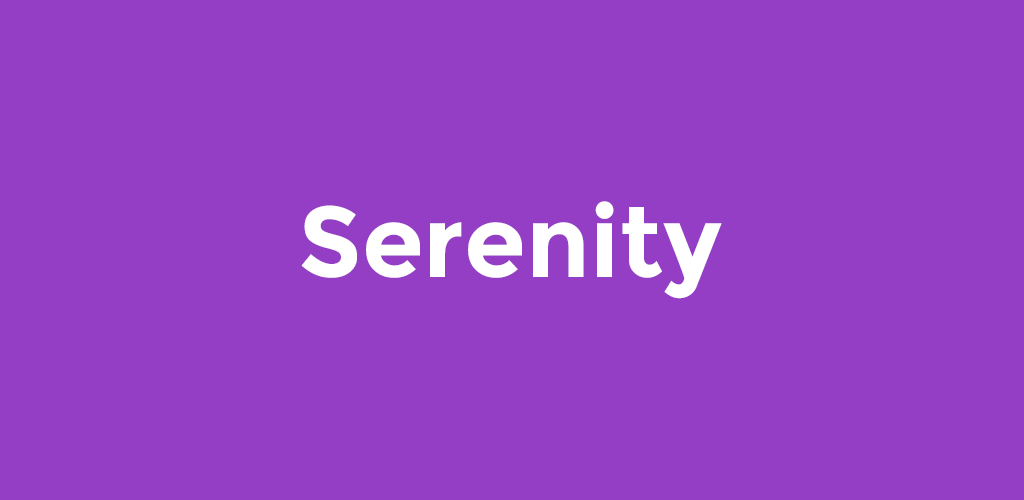
<style>
.page{position:relative;width:1024px;height:500px;background:#933ec5}
.page>*{position:absolute;margin:0}
.t1{font:100px "Montserrat-Bold";color:#ffffff}
</style>
<div class="page">
<p class="t1" style="left:301px;top:201px;width:421px;height:98px">Serenity</p>
</div>
